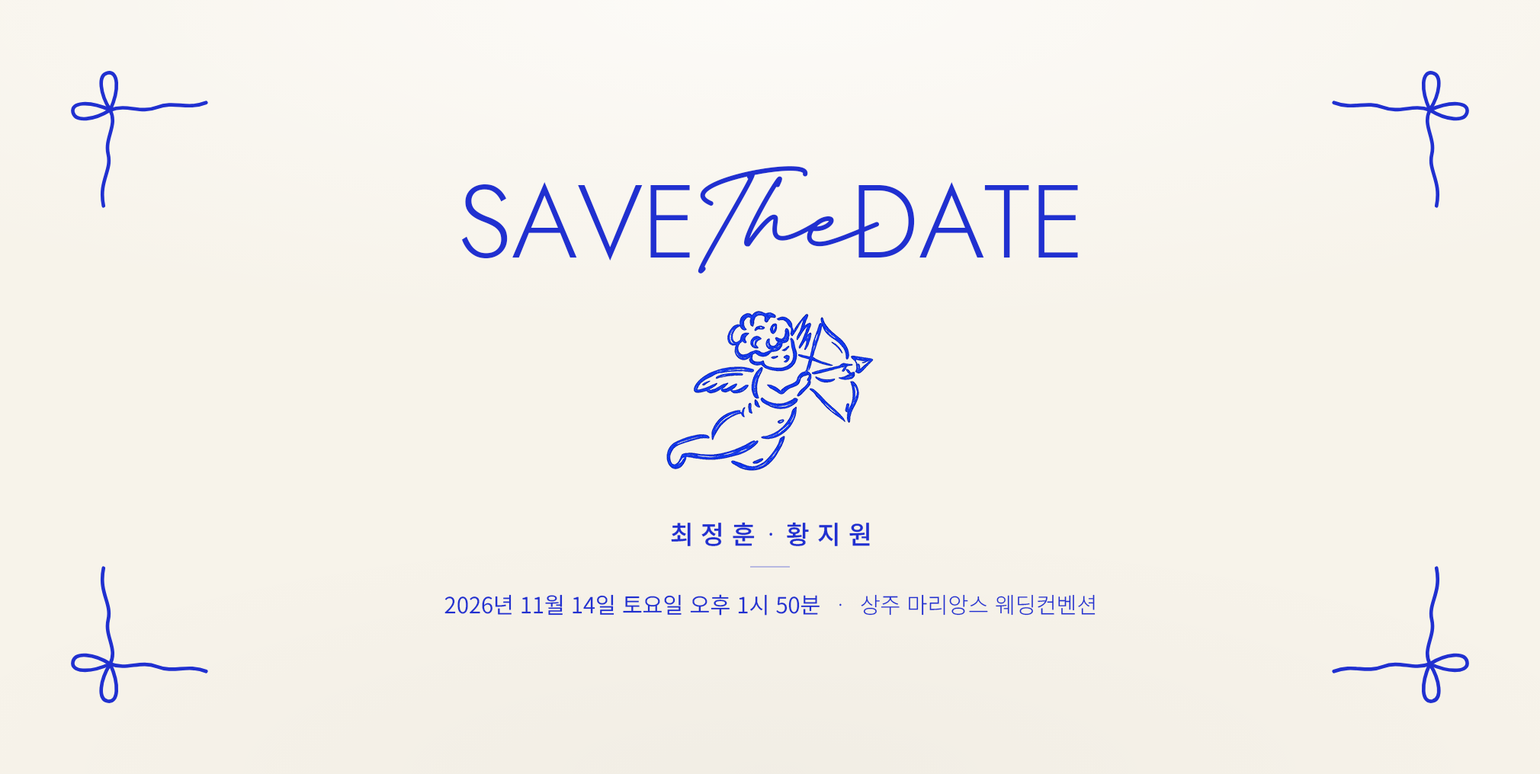
<style>
.page{position:relative;width:1540px;height:774px;background:#f7f3ea}
.page>*{position:absolute;margin:0}
.t1{font:124.4px "FestiganRegular";color:#2030d0}
.t2{font:103.7px "Jost-Light";letter-spacing:-0.005em;color:#2030d0}
.t3{font:25.4px "NotoSansKR-Medium";letter-spacing:0.3em;color:#2030d0}
.t4{font:25.4px "NotoSansKR-Medium";letter-spacing:0.1em;color:#2030d0}
.t5{font:25.4px "NotoSansKR-Light";letter-spacing:0.1em;color:#2030d0}
.t6{font:25.4px "NotoSansKR-Medium";letter-spacing:0.26em;color:#2030d0}
.t7{font:22.2px "NotoSansKR-DemiLight";color:#2030d0}
.t8{font:22.2px "NotoSansKR-Thin";letter-spacing:-0.02em;color:#2030d0}
.t9{font:22.2px "NotoSansKR-Light";color:#2030d0}
</style>
<div class="page">
<p class="t1" style="left:697px;top:166px;width:183px;height:108px">The</p>
<p class="t2" style="left:461px;top:182px;width:617px;height:79px">SAVE     DATE</p>
<p class="t3" style="left:671px;top:522px;width:199px;height:25px">최정<span class="t4">훈 </span><span class="t5">· </span>황지<span class="t6">원</span></p>
<p class="t7" style="left:444px;top:595px;width:651px;height:21px">2026년 11월 14일 토요일 오후 1시 50분   <span class="t8">·   </span><span class="t9">상주 마리앙스 웨딩컨벤션</span></p>
</div>
